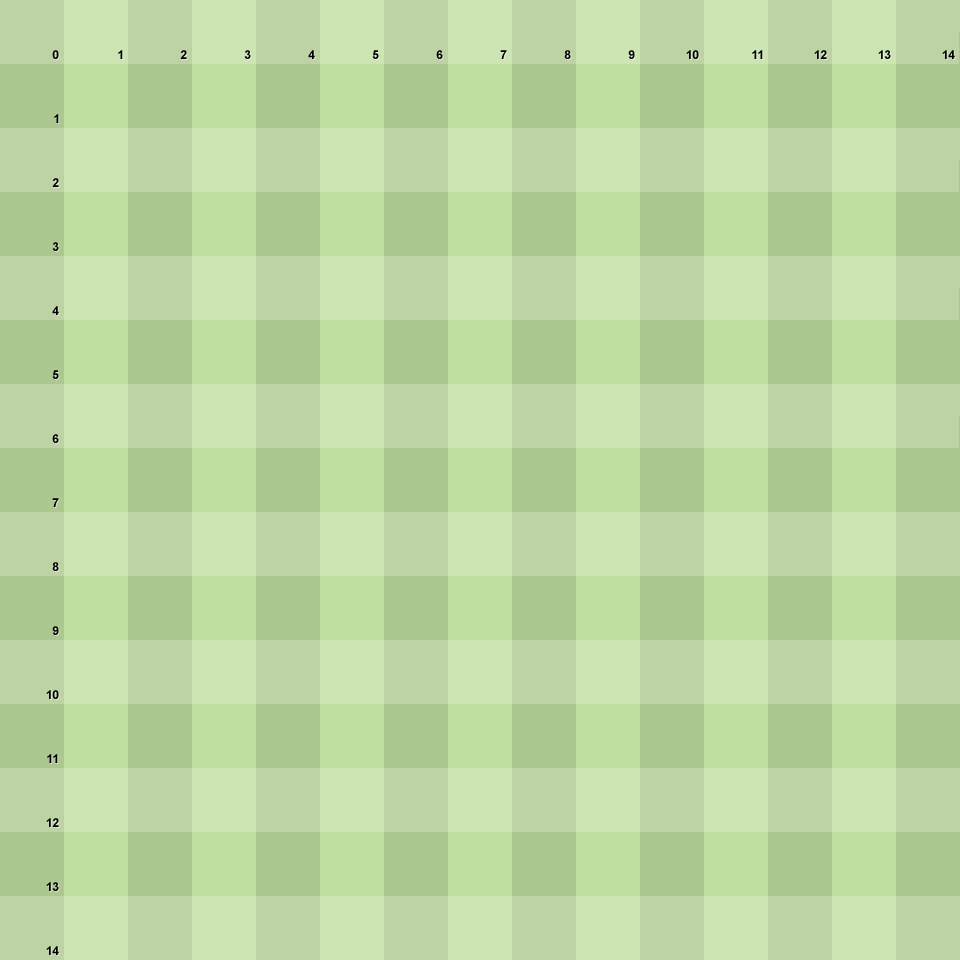
<style>
.page{position:relative;width:960px;height:960px;background:#bfdfa0}
.page>*{position:absolute;margin:0}
.t1{font:12px "Arial-BoldMT";color:#000000}
</style>
<div class="page">
<p class="t1" style="left:52px;top:50px;width:7px;height:9px">0</p>
<p class="t1" style="left:118px;top:50px;width:5px;height:9px">1</p>
<p class="t1" style="left:180px;top:50px;width:7px;height:9px">2</p>
<p class="t1" style="left:244px;top:50px;width:7px;height:9px">3</p>
<p class="t1" style="left:308px;top:50px;width:7px;height:9px">4</p>
<p class="t1" style="left:372px;top:50px;width:7px;height:9px">5</p>
<p class="t1" style="left:436px;top:50px;width:7px;height:9px">6</p>
<p class="t1" style="left:500px;top:50px;width:7px;height:9px">7</p>
<p class="t1" style="left:564px;top:50px;width:7px;height:9px">8</p>
<p class="t1" style="left:628px;top:50px;width:7px;height:9px">9</p>
<p class="t1" style="left:686px;top:50px;width:13px;height:9px">10</p>
<p class="t1" style="left:752px;top:50px;width:11px;height:9px">11</p>
<p class="t1" style="left:814px;top:50px;width:13px;height:9px">12</p>
<p class="t1" style="left:878px;top:50px;width:13px;height:9px">13</p>
<p class="t1" style="left:942px;top:50px;width:13px;height:9px">14</p>
<p class="t1" style="left:54px;top:114px;width:5px;height:9px">1</p>
<p class="t1" style="left:52px;top:178px;width:7px;height:9px">2</p>
<p class="t1" style="left:52px;top:242px;width:7px;height:9px">3</p>
<p class="t1" style="left:52px;top:306px;width:7px;height:9px">4</p>
<p class="t1" style="left:52px;top:370px;width:7px;height:9px">5</p>
<p class="t1" style="left:52px;top:434px;width:7px;height:9px">6</p>
<p class="t1" style="left:52px;top:498px;width:7px;height:9px">7</p>
<p class="t1" style="left:52px;top:562px;width:7px;height:9px">8</p>
<p class="t1" style="left:52px;top:626px;width:7px;height:9px">9</p>
<p class="t1" style="left:46px;top:690px;width:13px;height:9px">10</p>
<p class="t1" style="left:47px;top:754px;width:11px;height:9px">11</p>
<p class="t1" style="left:46px;top:818px;width:13px;height:9px">12</p>
<p class="t1" style="left:46px;top:882px;width:13px;height:9px">13</p>
<p class="t1" style="left:46px;top:946px;width:13px;height:9px">14</p>
</div>
